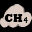
<style>
.page{position:relative;width:32px;height:32px;background:#000000}
.page>*{position:absolute;margin:0}
.t1{font:11px "Rockwell-ExtraBold";color:#010101}
</style>
<div class="page">
<p class="t1" style="left:4px;top:14px;width:19px;height:8px">CH</p>
</div>
